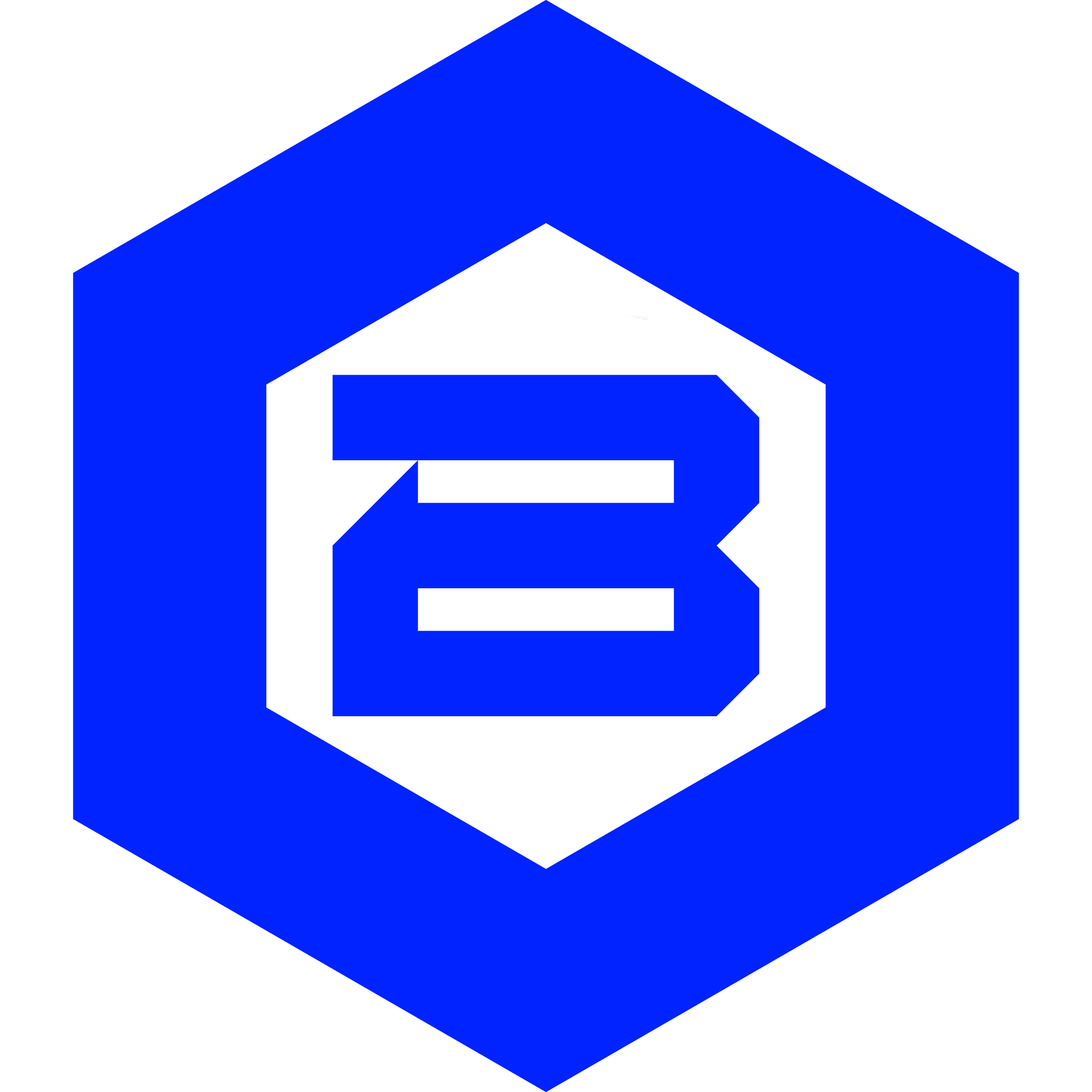
<style>
.page{position:relative;width:1092px;height:1092px;background:#0023ff}
.page>*{position:absolute;margin:0}
.t1{font:426.6px "Digital-Desolation-Plus";color:#0023ff;text-transform:uppercase}
</style>
<div class="page">
<p class="t1" style="left:332px;top:375px;width:427px;height:341px">B</p>
</div>
